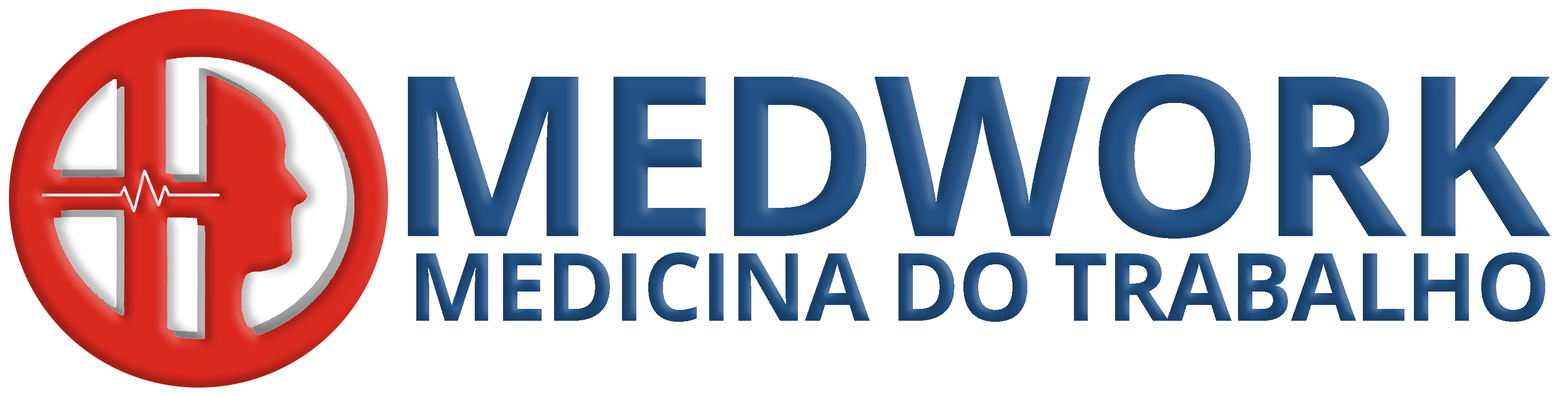
<style>
.page{position:relative;width:1568px;height:396px;background:#ffffff}
.page>*{position:absolute;margin:0}
.t1{font:223px "OpenSans-Bold";letter-spacing:-0.02em;color:#215185}
.t2{font:94.2px "OpenSans-Bold";letter-spacing:-0.02em;color:#1e4a7a}
</style>
<div class="page">
<p class="t1" style="left:408px;top:74px;width:1142px;height:165px">MEDWORK</p>
<p class="t2" style="left:416px;top:253px;width:1129px;height:69px">MEDICINA DO TRABALHO</p>
</div>
